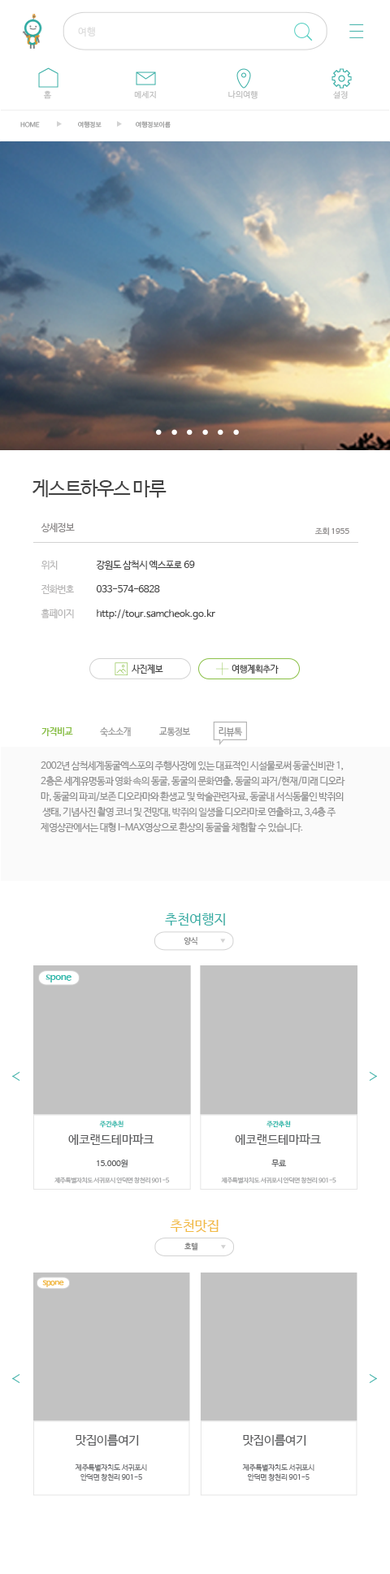
<style>
.page{position:relative;width:390px;height:1574px;background:#ffffff}
.page>*{position:absolute;margin:0}
.t1{font:9.7px "NanumBarunGothic";letter-spacing:0.025em;color:#dcdcdc}
.t2{font:8.1px "NanumBarunGothic";letter-spacing:0.025em;color:#bfbfbf}
.t3{font:6.5px "NanumBarunGothic";color:#999a9a}
.t4{font:19.2px "NanumBarunGothic";letter-spacing:-0.05em;color:#424242}
.t5{font:9.4px "NanumBarunGothic";letter-spacing:-0.025em;color:#8b8888}
.t6{font:8.1px "NanumBarunGothic";letter-spacing:-0.025em;color:#8b8888}
.t7{font:9.4px "NanumBarunGothic";letter-spacing:-0.025em;color:#b7b6b6}
.t8{font:9.4px "NanumBarunGothic";letter-spacing:-0.025em;color:#424242}
.t9{font:9.4px "NanumBarunGothic";color:#424242}
.t10{font:8.9px "NanumBarunGothic";letter-spacing:-0.025em;color:#424242}
.t11{font:9.1px "NanumBarunGothicBold";letter-spacing:-0.05em;color:#89bf44}
.t12{font:9.1px "NanumBarunGothic";letter-spacing:-0.05em;color:#959595}
.t13{font:9.1px "NanumBarunGothic";letter-spacing:-0.05em;color:#8e8e8e}
.t14{font:9.7px/15.4px "NanumBarunGothic";letter-spacing:-0.05em;color:#8e8e8e}
.t15{font:13.7px "NanumBarunGothic";color:#36ada4}
.t16{font:7.7px "NanumBarunGothic";letter-spacing:-0.025em;color:#818181}
.t17{font:10px "NanumBarunGothicBold";letter-spacing:-0.05em;color:#25b7aa}
.t18{font:6.9px "NanumBarunGothicBold";letter-spacing:-0.025em;color:#25b7aa}
.t19{font:12.4px "NanumBarunGothic";letter-spacing:-0.025em;color:#58595b}
.t20{font:8.1px "NanumBarunGothic";letter-spacing:-0.025em;color:#555658}
.t21{font:6.2px "NanumBarunGothic";letter-spacing:-0.025em;color:#a3a4a6}
.t22{font:13.7px "NanumBarunGothic";color:#f1ba44}
.t23{font:8.1px "NanumBarunGothicBold";letter-spacing:-0.05em;color:#f1ba44}
.t24{font:12.3px "NanumBarunGothic";letter-spacing:-0.025em;color:#58595b}
.t25{font:7.4px/9.8px "NanumBarunGothic";letter-spacing:-0.025em;color:#6d6e71}
</style>
<div class="page">
<p class="t1" style="left:78px;top:27px;width:17px;height:10px">여행</p>
<p class="t2" style="left:43px;top:90px;width:9px;height:9px">홈</p>
<p class="t2" style="left:134px;top:91px;width:22px;height:7px">메세지</p>
<p class="t2" style="left:228px;top:90px;width:30px;height:9px">나의여행</p>
<p class="t2" style="left:333px;top:91px;width:15px;height:8px">설정</p>
<p class="t3" style="left:20px;top:122px;width:20px;height:6px">HOME</p>
<p class="t3" style="left:78px;top:121px;width:24px;height:7px">여행정보</p>
<p class="t3" style="left:136px;top:121px;width:35px;height:7px">여행정보이름</p>
<p class="t4" style="left:32px;top:479px;width:135px;height:19px">게스트하우스 마루</p>
<p class="t5" style="left:41px;top:522px;width:34px;height:10px">상세정보</p>
<p class="t6" style="left:314px;top:527px;width:35px;height:8px">조회 1955</p>
<p class="t7" style="left:41px;top:561px;width:17px;height:9px">위치</p>
<p class="t8" style="left:96px;top:560px;width:99px;height:10px">강원도 삼척시 엑스포로 69</p>
<p class="t7" style="left:41px;top:584px;width:33px;height:10px">전화번호</p>
<p class="t8" style="left:96px;top:585px;width:64px;height:7px">033-574-6828</p>
<p class="t7" style="left:41px;top:609px;width:33px;height:9px">홈페이지</p>
<p class="t9" style="left:97px;top:609px;width:118px;height:11px">http://tour.samcheok.go.kr</p>
<p class="t10" style="left:132px;top:664px;width:31px;height:10px">사진제보</p>
<p class="t10" style="left:232px;top:665px;width:47px;height:9px">여행계획추가</p>
<p class="t11" style="left:41px;top:727px;width:32px;height:9px">가격비교</p>
<p class="t12" style="left:100px;top:727px;width:31px;height:10px">숙소소개</p>
<p class="t13" style="left:159px;top:727px;width:31px;height:9px">교통정보</p>
<p class="t13" style="left:219px;top:727px;width:24px;height:10px">리뷰톡</p>
<p class="t14" style="left:41px;top:760px;width:304px;height:72px">2002년 삼척세계동굴엑스포의 주행사장에 있는 대표적인 시설물로써 동굴신비관 1, <br>2층은 세계유명동과 영화 속의 동굴, 동굴의 문화연출, 동굴의 과거/현재/미래 디오라<br>마, 동굴의 파괴/보존 디오라마와 환생교 및 학술관련자료, 동굴내 서식동물인 박쥐의<br> 생태, 기념사진 촬영 코너 및 전망대, 박쥐의 일생을 디오라마로 연출하고, 3,4층 주<br>제영상관에서는 대형 I-MAX영상으로 환상의 동굴을 체험할 수 있습니다.</p>
<p class="t15" style="left:165px;top:912px;width:60px;height:13px">추천여행지</p>
<p class="t16" style="left:184px;top:937px;width:13px;height:8px">양식</p>
<p class="t17" style="left:45px;top:974px;width:26px;height:8px">spone</p>
<p class="t18" style="left:99px;top:1120px;width:24px;height:8px">주간추천</p>
<p class="t18" style="left:266px;top:1120px;width:25px;height:8px">주간추천</p>
<p class="t19" style="left:68px;top:1133px;width:86px;height:12px">에코랜드테마파크</p>
<p class="t19" style="left:235px;top:1133px;width:86px;height:12px">에코랜드테마파크</p>
<p class="t20" style="left:97px;top:1159px;width:31px;height:8px">15.000원</p>
<p class="t20" style="left:271px;top:1159px;width:16px;height:8px">무료</p>
<p class="t21" style="left:54px;top:1176px;width:116px;height:8px">제주특별자치도 서귀포시 안덕면 창천리 901-5</p>
<p class="t21" style="left:221px;top:1176px;width:115px;height:8px">제주특별자치도 서귀포시 안덕면 창천리 901-5</p>
<p class="t22" style="left:170px;top:1219px;width:49px;height:13px">추천맛집</p>
<p class="t16" style="left:184px;top:1242px;width:14px;height:8px">호텔</p>
<p class="t23" style="left:42px;top:1280px;width:22px;height:7px">spone</p>
<p class="t24" style="left:76px;top:1434px;width:63px;height:12px">맛집이름여기</p>
<p class="t24" style="left:243px;top:1434px;width:63px;height:12px">맛집이름여기</p>
<p class="t25" style="left:75px;top:1463px;width:72px;height:18px;text-align:center">제주특별자치도 서귀포시<br>안덕면 창천리 901-5</p>
<p class="t25" style="left:242px;top:1463px;width:72px;height:18px;text-align:center">제주특별자치도 서귀포시<br>안덕면 창천리 901-5</p>
</div>
